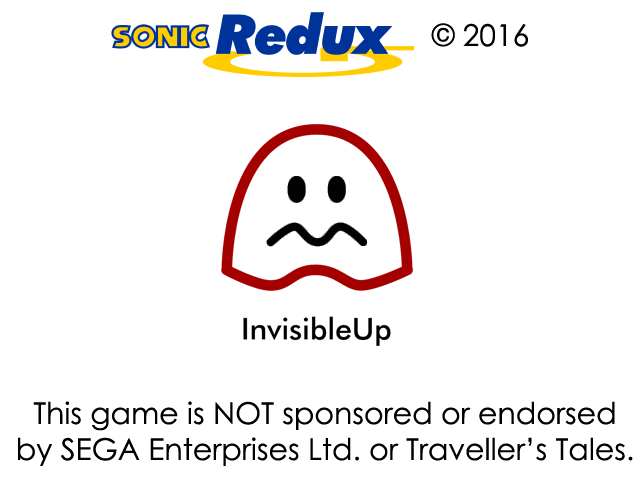
<style>
.page{position:relative;width:640px;height:480px;background:#ffffff}
.page>*{position:absolute;margin:0}
.t1{font:30px "CenturyGothic";color:#000000}
</style>
<div class="page">
<p class="t1" style="left:431px;top:23px;width:97px;height:24px">© 2016</p>
<p class="t1" style="left:18px;top:401px;width:615px;height:65px;text-align:center">This game is NOT sponsored or endorsed<br>by SEGA Enterprises Ltd. or Traveller’s Tales.</p>
</div>
